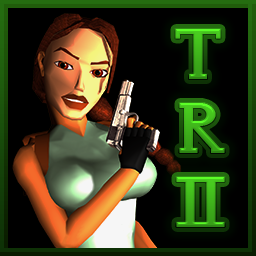
<style>
.page{position:relative;width:256px;height:256px;background:#000000}
.page>*{position:absolute;margin:0}
.t1{font:90px "TombRaiderClassic-Light";letter-spacing:-0.22em}
</style>
<div class="page">
<p class="t1" style="left:175px;top:29px;width:46px;height:50px">T</p>
<p class="t1" style="left:179px;top:103px;width:46px;height:50px">R</p>
<p class="t1" style="left:176px;top:177px;width:49px;height:50px">II</p>
</div>
